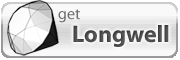
<style>
.page{position:relative;width:180px;height:60px;background:#f9f9f9}
.page>*{position:absolute;margin:0}
.t1{font:16px "Myriad-Roman";color:#6d6d6d}
.t2{font:24px "Myriad-Bold";color:#5c5c5c}
</style>
<div class="page">
<p class="t1" style="left:58px;top:9px;width:22px;height:14px">get</p>
<p class="t2" style="left:73px;top:25px;width:96px;height:22px">Longwell</p>
</div>
